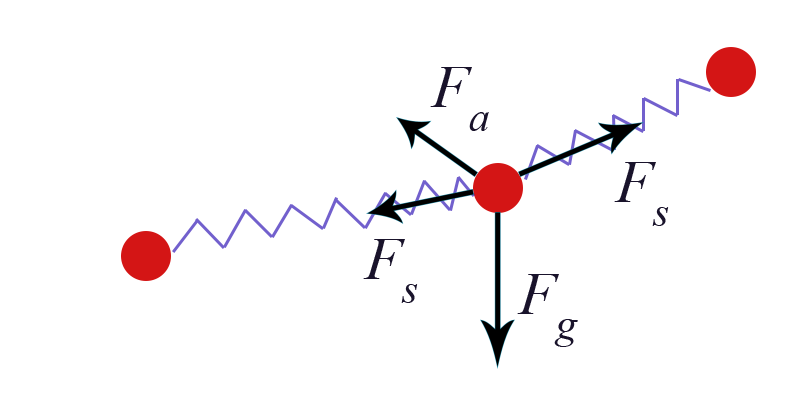
<style>
.page{position:relative;width:800px;height:400px;background:#ffffff}
.page>*{position:absolute;margin:0}
.t1{font:60px "TimesNewRomanPS-ItalicMT";color:#19132b}
.t2{font:72px "TimesNewRomanPS-ItalicMT";color:#19132b}
</style>
<div class="page">
<p class="t1" style="left:430px;top:67px;width:59px;height:64px">F<span class="t2">a</span></p>
<p class="t1" style="left:614px;top:162px;width:55px;height:64px">F<span class="t2">s</span></p>
<p class="t1" style="left:363px;top:239px;width:55px;height:64px">F<span class="t2">s</span></p>
<p class="t1" style="left:517px;top:274px;width:61px;height:73px">F<span class="t2">g</span></p>
</div>
